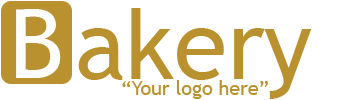
<style>
.page{position:relative;width:350px;height:100px;background:#ffffff}
.page>*{position:absolute;margin:0}
.t1{font:96px "TrebuchetMS";color:#fffffe}
.t2{font:96px "TrebuchetMS";color:#ba912f}
.t3{font:19.6px "TrebuchetMS";color:#ba912f}
</style>
<div class="page">
<p class="t1" style="left:16px;top:9px;width:45px;height:69px">B</p>
<p class="t2" style="left:78px;top:8px;width:234px;height:91px">akery</p>
<p class="t3" style="left:122px;top:80px;width:146px;height:19px">“Your logo here”</p>
</div>
